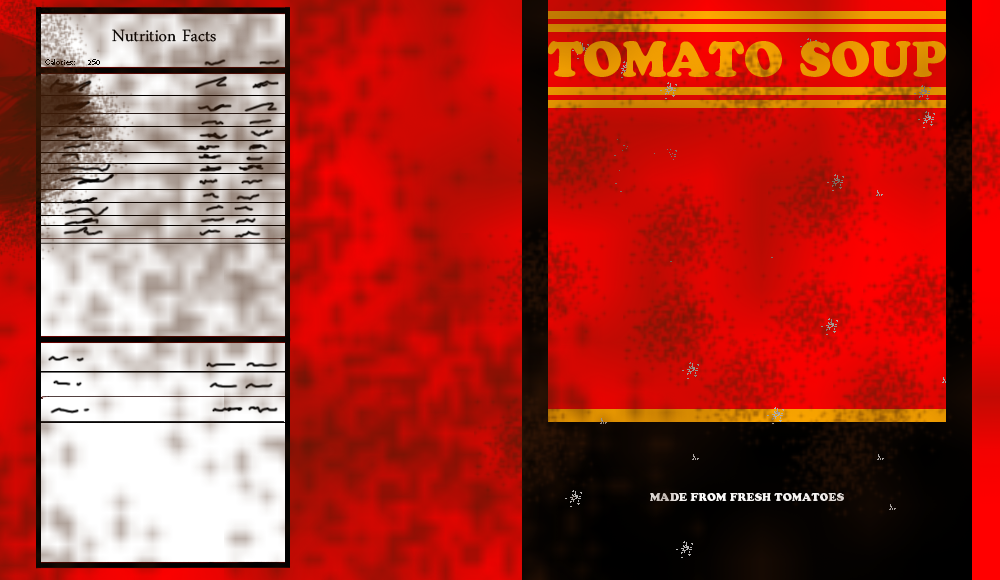
<style>
.page{position:relative;width:1000px;height:580px}
.page>*{position:absolute;margin:0}
.t1{font:24px "DaunPenh";color:#000000}
.t2{font:48px "CooperBlackStd";color:#e89701}
.t3{font:11px "CooperBlackStd";color:#ffffff}
</style>
<div class="page">
<p class="t1" style="left:112px;top:29px;width:104px;height:13px">Nutrition Facts</p>
<p class="t2" style="left:547px;top:41px;width:399px;height:36px">TOMATO SOUP</p>
<p class="t3" style="left:650px;top:492px;width:194px;height:9px">MADE FROM FRESH TOMATOES</p>
</div>
